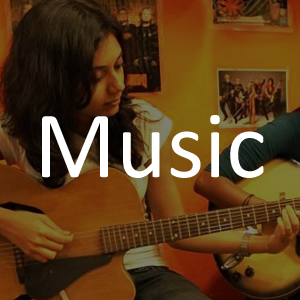
<style>
.page{position:relative;width:300px;height:300px}
.page>*{position:absolute;margin:0}
.t1{font:96px "Calibri";color:#ffffff}
</style>
<div class="page">
<p class="t1" style="left:42px;top:115px;width:222px;height:63px">Music</p>
</div>
